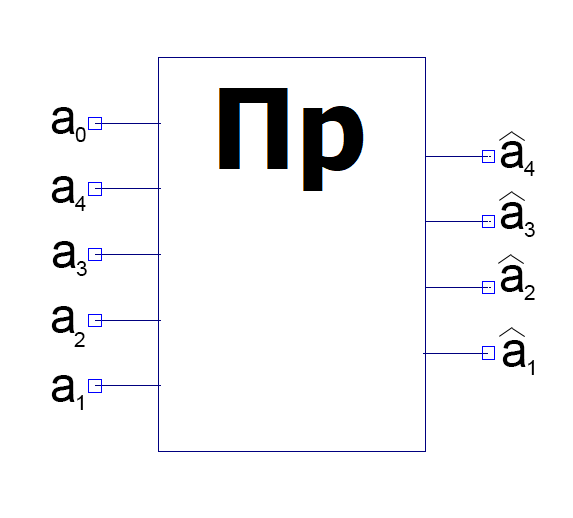
<style>
.page{position:relative;width:573px;height:518px;background:#ffffff}
.page>*{position:absolute;margin:0}
.t1{font:48px "ArialMT";color:#000000}
.t2{font:21.3px "ArialMT";color:#000000}
</style>
<div class="page">
<p class="t1" style="left:51px;top:107px;width:24px;height:27px">a</p>
<p class="t2" style="left:75px;top:127px;width:11px;height:15px">0</p>
<p class="t1" style="left:500px;top:141px;width:24px;height:27px">a</p>
<p class="t2" style="left:524px;top:161px;width:11px;height:15px">4</p>
<p class="t1" style="left:51px;top:176px;width:24px;height:27px">a</p>
<p class="t2" style="left:75px;top:196px;width:11px;height:15px">4</p>
<p class="t1" style="left:500px;top:202px;width:24px;height:27px">a</p>
<p class="t2" style="left:524px;top:222px;width:11px;height:15px">3</p>
<p class="t1" style="left:52px;top:241px;width:24px;height:27px">a</p>
<p class="t2" style="left:76px;top:261px;width:11px;height:15px">3</p>
<p class="t1" style="left:500px;top:265px;width:24px;height:27px">a</p>
<p class="t2" style="left:524px;top:285px;width:11px;height:15px">2</p>
<p class="t1" style="left:51px;top:306px;width:24px;height:27px">a</p>
<p class="t2" style="left:74px;top:332px;width:11px;height:15px">2</p>
<p class="t1" style="left:502px;top:340px;width:24px;height:27px">a</p>
<p class="t2" style="left:528px;top:360px;width:6px;height:15px">1</p>
<p class="t1" style="left:51px;top:375px;width:24px;height:27px">a</p>
<p class="t2" style="left:77px;top:395px;width:6px;height:15px">1</p>
</div>
